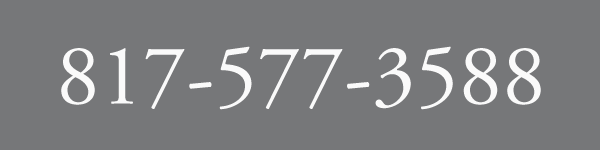
<style>
.page{position:relative;width:600px;height:150px;background:#767779}
.page>*{position:absolute;margin:0}
.t1{font:86.8px "AGaramondPro-Regular";color:#fafafa}
</style>
<div class="page">
<p class="t1" style="left:61px;top:46px;width:480px;height:64px">817-577-3588</p>
</div>
